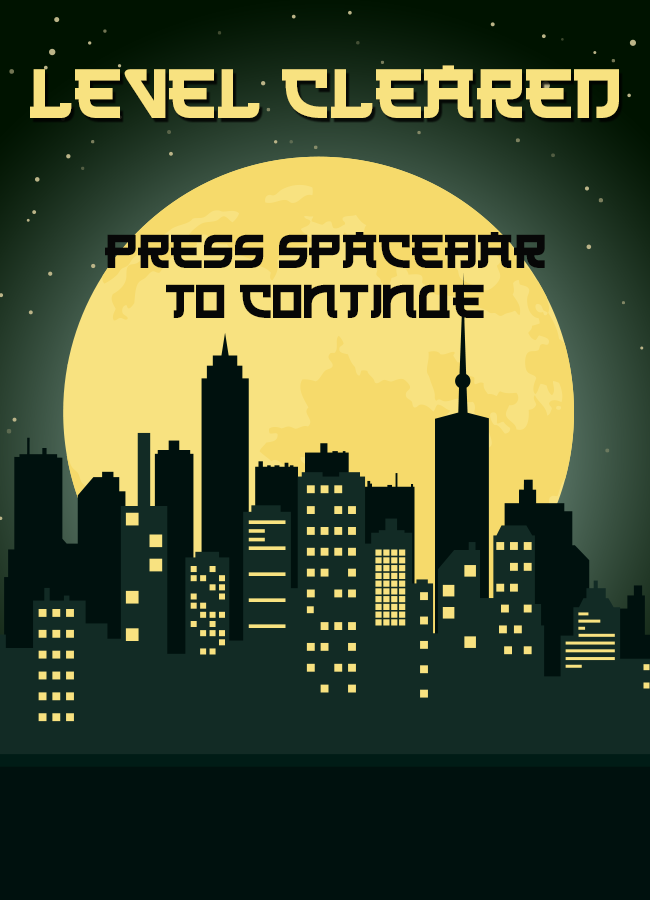
<style>
.page{position:relative;width:650px;height:900px;background:#00110e}
.page>*{position:absolute;margin:0}
.t1{font:76.8px "Japanese3017";color:#f8e280;font-variant:small-caps}
.t2{font:52.4px "Japanese3017";color:#070707;font-variant:small-caps}
</style>
<div class="page">
<p class="t1" style="left:30px;top:65px;width:589px;height:53px">LEVEL CLEARED</p>
<p class="t2" style="left:105px;top:232px;width:440px;height:36px">PRESS SPACEBAR</p>
<p class="t2" style="left:166px;top:284px;width:318px;height:34px">TO CONTINUE</p>
</div>
